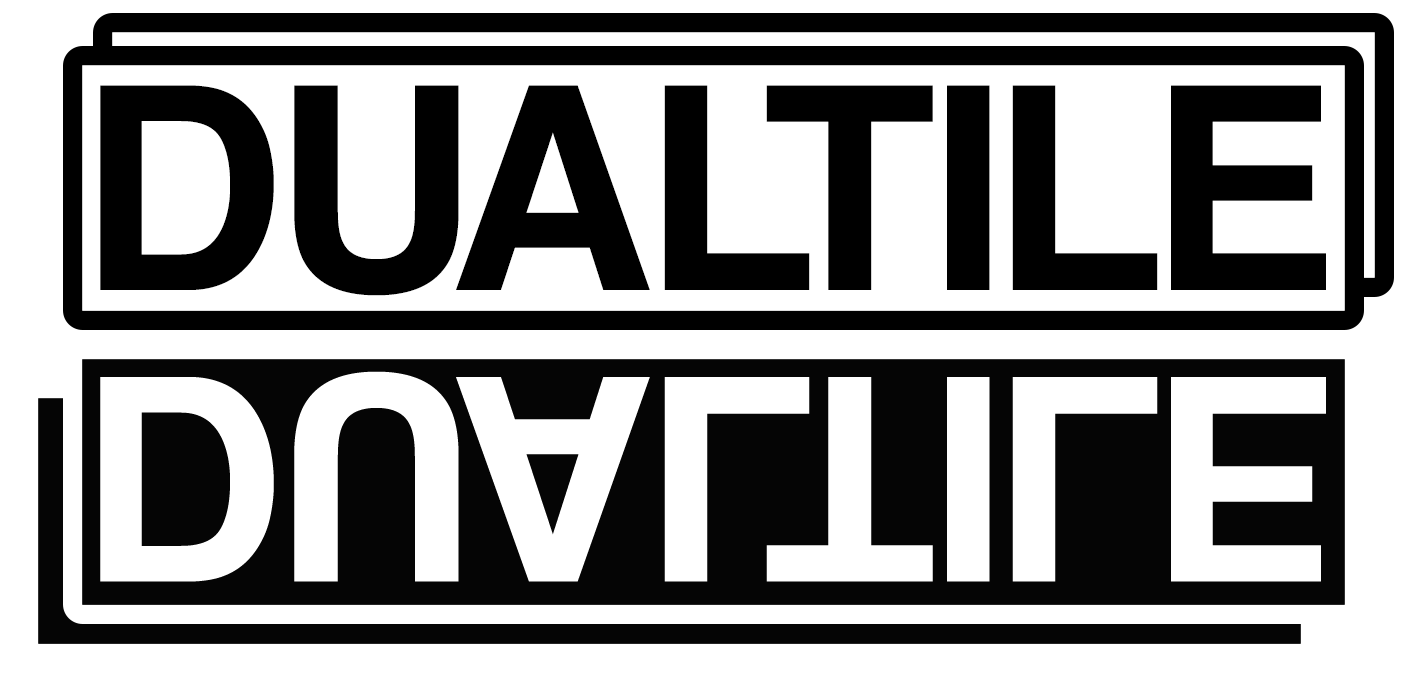
<style>
.page{position:relative;width:1404px;height:687px;background:#ffffff}
.page>*{position:absolute;margin:0}
.t1{font:284px "Helvetica-Bold";color:#000000}
</style>
<div class="page">
<p class="t1" style="left:100px;top:85px;width:1226px;height:211px">DUALTILE</p>
</div>
